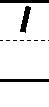
<style>
.page{position:relative;width:49px;height:107px;background:#ffffff}
.page>*{position:absolute;margin:0}
.t1{font:190px "Europa-Light";color:#020202}
</style>
<div class="page">
<p class="t1" style="left:20px;top:6px;width:11px;height:27px;rotate:13deg">‘</p>
</div>
